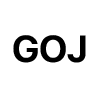
<style>
.page{position:relative;width:100px;height:100px;background:#ffffff}
.page>*{position:absolute;margin:0}
.t1{font:37.5px "SFProDisplay-Bold";color:#000000}
</style>
<div class="page">
<p class="t1" style="left:13px;top:35px;width:73px;height:28px">GOJ</p>
</div>
